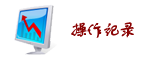
<style>
.page{position:relative;width:142px;height:58px;background:#ffffff}
.page>*{position:absolute;margin:0}
.t1{font:18px "FZSTK--GBK1-0";letter-spacing:-0.14em;color:#8a0303;font-weight:bold}
</style>
<div class="page">
<p class="t1" style="left:71px;top:22px;width:63px;height:16px">操作记录</p>
</div>
